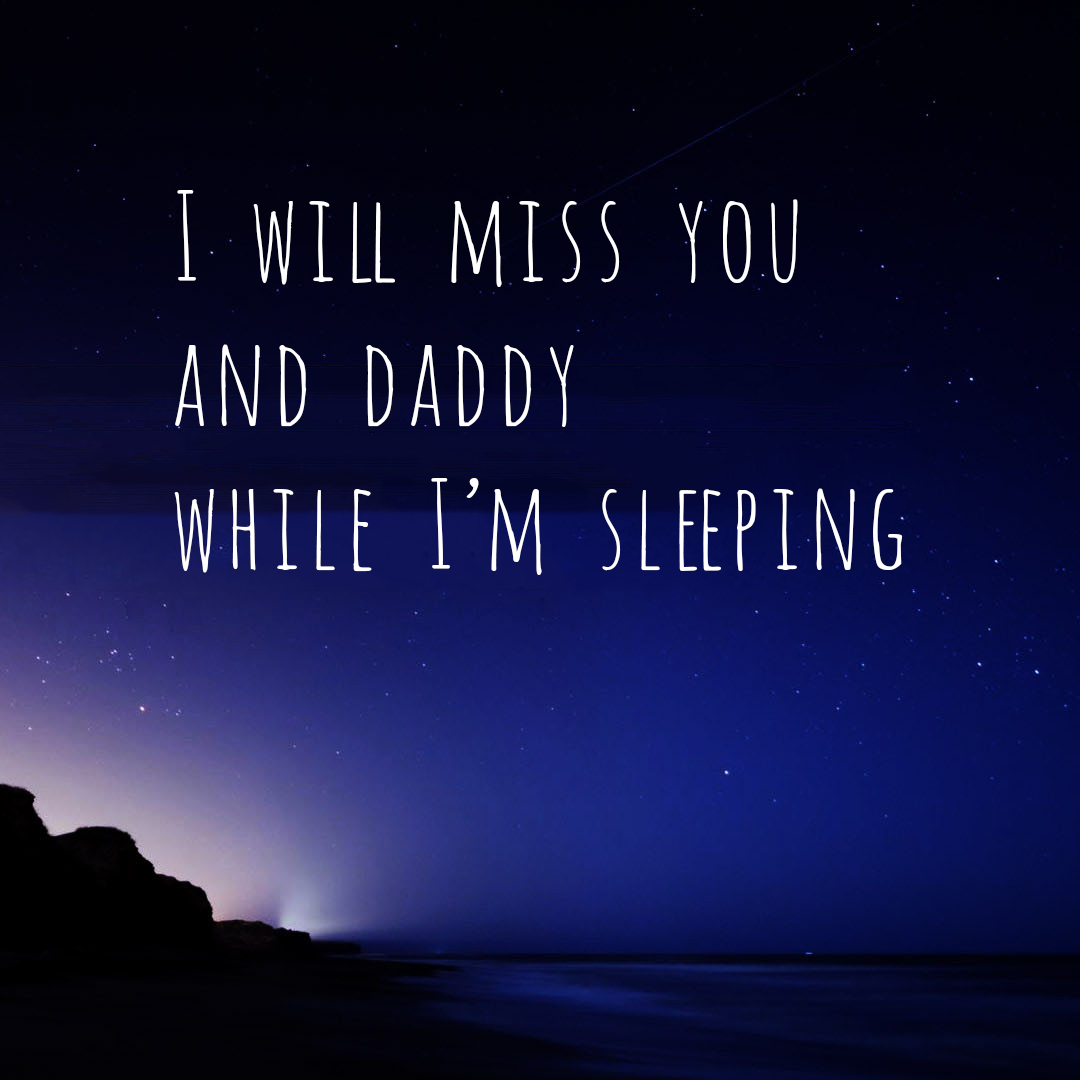
<style>
.page{position:relative;width:1080px;height:1080px}
.page>*{position:absolute;margin:0}
.t1{font:120px "Amatic";color:#ffffff}
</style>
<div class="page">
<p class="t1" style="left:174px;top:190px;width:729px;height:385px">I will miss you <br>and daddy<br>while I’m sleeping</p>
</div>
